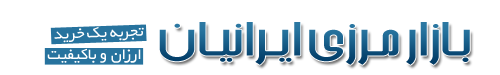
<style>
.page{position:relative;width:500px;height:75px;background:#ffffff}
.page>*{position:absolute;margin:0}
.t1{font:16.9px "BYekan";color:#ffffff}
.t2{font:59.6px "BArshia";color:#165b86;scale:1.35 1}
</style>
<div class="page">
<p class="t1" style="left:54px;top:26px;width:90px;height:17px;rotate:-2deg">تجربه یک خرید</p>
<p class="t2" style="left:159px;top:22px;width:311px;height:43px">بـازار مـرزی ایـرانیـان</p>
<p class="t1" style="left:47px;top:48px;width:94px;height:15px">ارزان و باکیفیت</p>
</div>
